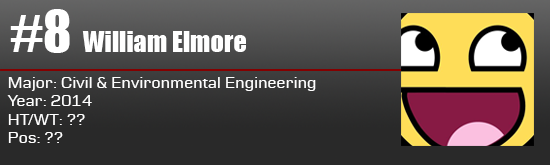
<style>
.page{position:relative;width:550px;height:165px}
.page>*{position:absolute;margin:0}
.t1{font:52.8px "Impact";color:#ffffff}
.t2{font:26.4px "Impact";color:#ffffff}
.t3{font:15.4px "Moire";color:#ffffff}
</style>
<div class="page">
<p class="t1" style="left:10px;top:9px;width:60px;height:44px">#8</p>
<p class="t2" style="left:82px;top:31px;width:164px;height:21px">William Elmore</p>
<p class="t3" style="left:7px;top:77px;width:309px;height:66px">Major: Civil &amp; Environmental Engineering<br>Year: 2014<br>HT/WT: ??<br>Pos: ??</p>
</div>
